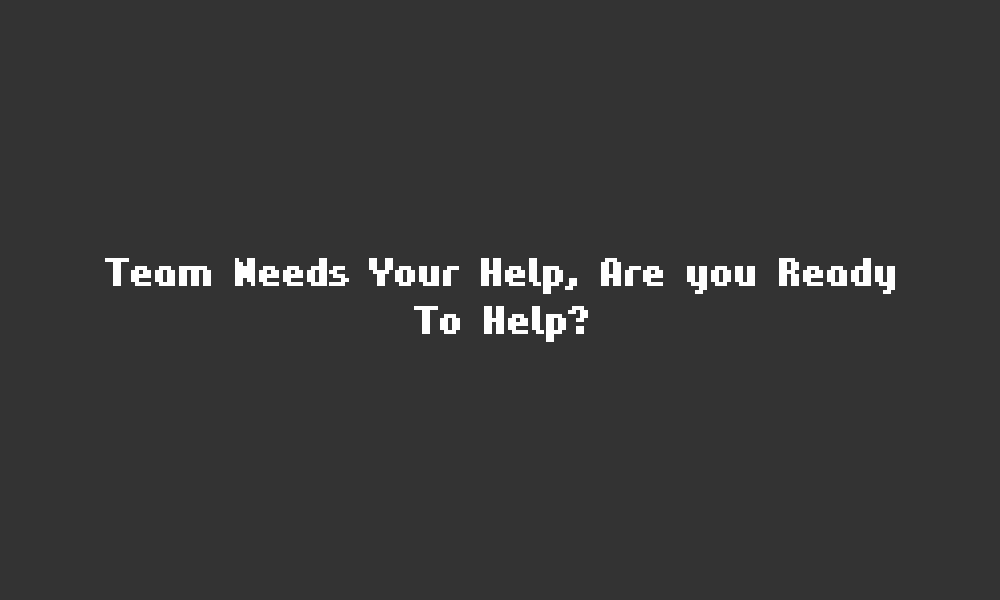
<style>
.page{position:relative;width:1000px;height:600px;background:#333333}
.page>*{position:absolute;margin:0}
.t1{font:40px "Hardpixel";color:#ffffff}
</style>
<div class="page">
<p class="t1" style="left:105px;top:258px;width:790px;height:84px;text-align:center">Team Needs Your Help, Are you Ready<br>?To Help</p>
</div>
